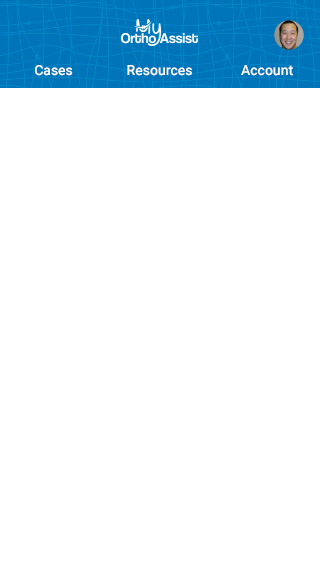
<style>
.page{position:relative;width:320px;height:568px;background:#ffffff}
.page>*{position:absolute;margin:0}
.t1{font:14px "Roboto-Medium";color:#ffffff}
</style>
<div class="page">
<p class="t1" style="left:35px;top:65px;width:38px;height:11px">Cases</p>
<p class="t1" style="left:127px;top:65px;width:65px;height:11px">Resources</p>
<p class="t1" style="left:241px;top:65px;width:52px;height:11px">Account</p>
</div>
